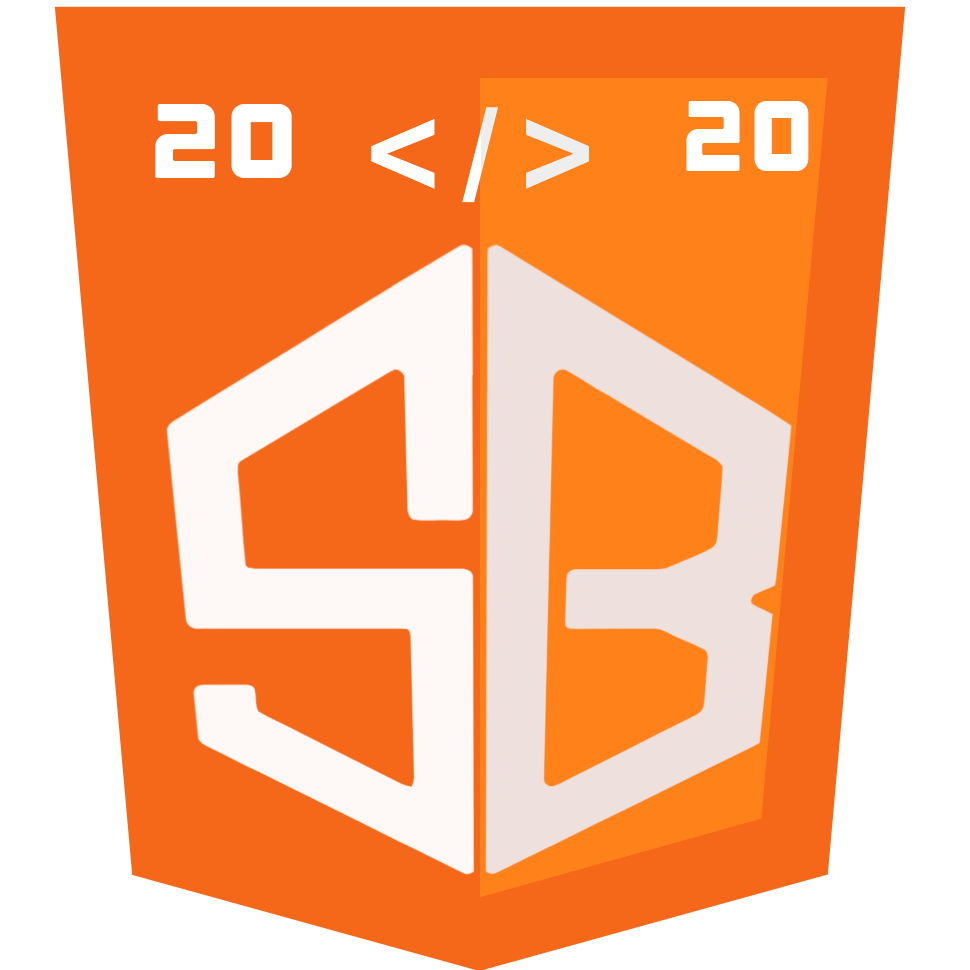
<style>
.page{position:relative;width:970px;height:970px;background:#f5681a}
.page>*{position:absolute;margin:0}
.t1{font:100px "Outage-Regular";color:#ffffff}
.t2{font:105.5px "Outage-Regular";color:#ffffff;scale:1.06 1}
</style>
<div class="page">
<p class="t1" style="left:686px;top:101px;width:123px;height:70px">20</p>
<p class="t2" style="left:155px;top:104px;width:137px;height:74px">20</p>
</div>
